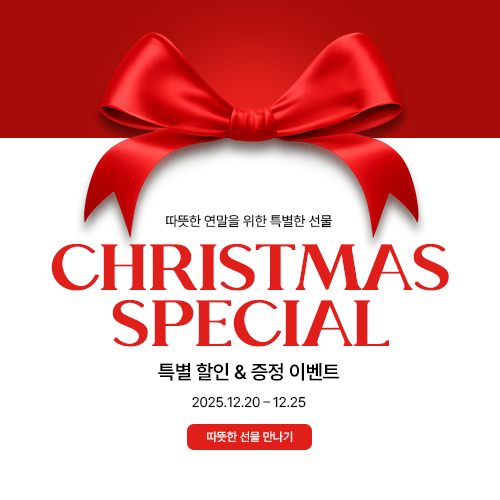
<style>
.page{position:relative;width:500px;height:500px;background:#ffffff}
.page>*{position:absolute;margin:0}
.t1{font:14px "Pretendard-Regular";letter-spacing:-0.02em;color:#000000}
.t2{font:69.1px/56px "ChicRoyale";color:#e01f1b;text-transform:uppercase;font-weight:bold;scale:1.14 1}
.t3{font:20px "Pretendard-SemiBold";letter-spacing:-0.02em;color:#000000}
.t4{font:12px "Pretendard-Regular";letter-spacing:-0.02em;color:#ffffff}
</style>
<div class="page">
<p class="t1" style="left:166px;top:214px;width:166px;height:14px">따뜻한 연말을 위한 특별한 선물</p>
<p class="t2" style="left:51px;top:244px;width:398px;height:103px;text-align:center">Christmas<br>Special</p>
<p class="t3" style="left:158px;top:363px;width:182px;height:18px">특별 할인 &amp; 증정 이벤트</p>
<p class="t1" style="left:192px;top:396px;width:114px;height:12px">2025.12.20 – 12.25</p>
<p class="t4" style="left:207px;top:431px;width:86px;height:12px">따뜻한 선물 만나기</p>
</div>
